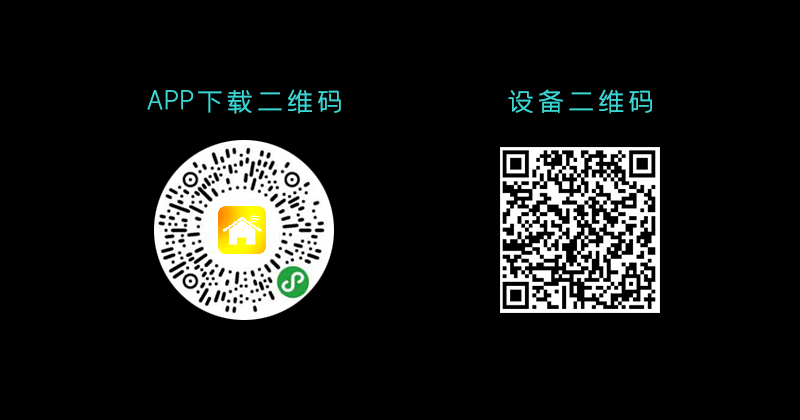
<style>
.page{position:relative;width:800px;height:420px;background:#000000}
.page>*{position:absolute;margin:0}
.t1{font:30px "zihun58hao-chuangzhonghei";letter-spacing:-0.025em;color:#3dd5d3;font-weight:bold}
</style>
<div class="page">
<p class="t1" style="left:147px;top:89px;width:194px;height:25px">APP下载二维码</p>
<p class="t1" style="left:508px;top:89px;width:144px;height:25px">设备二维码</p>
</div>
